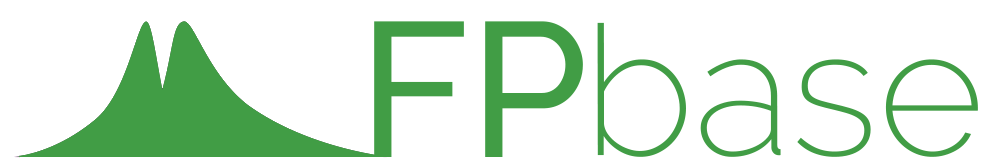
<style>
.page{position:relative;width:996px;height:165px;background:#ffffff}
.page>*{position:absolute;margin:0}
.t1{font:191px "Raleway-Medium";color:#419d45}
.t2{font:180.6px "Raleway-ExtraLight";color:#419d45}
</style>
<div class="page">
<p class="t1" style="left:374px;top:21px;width:209px;height:136px">FP</p>
<p class="t2" style="left:597px;top:22px;width:381px;height:135px">base</p>
</div>
